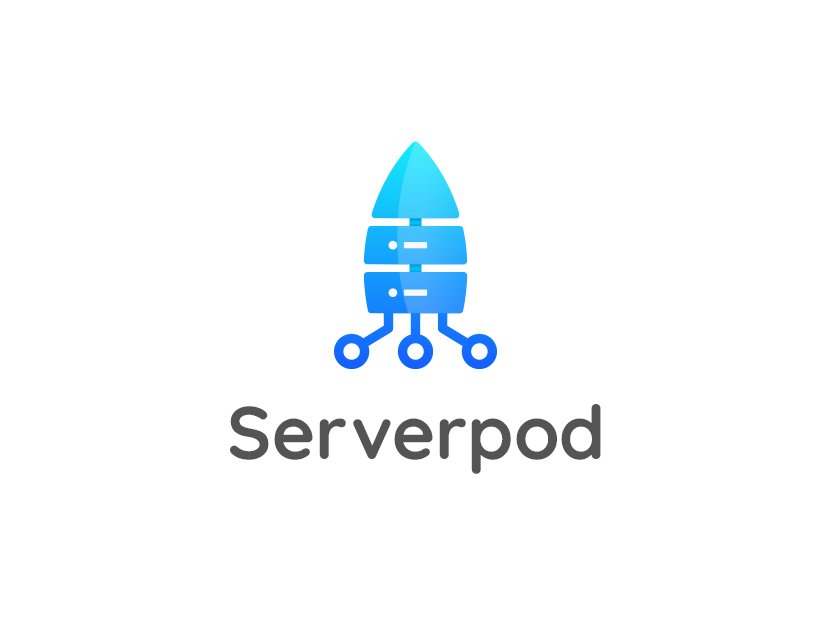
<style>
.page{position:relative;width:832px;height:627px;background:#ffffff}
.page>*{position:absolute;margin:0}
.t1{font:74.3px "Quicksand-Bold";color:#545454}
</style>
<div class="page">
<p class="t1" style="left:230px;top:404px;width:371px;height:70px">Serverpod</p>
</div>
